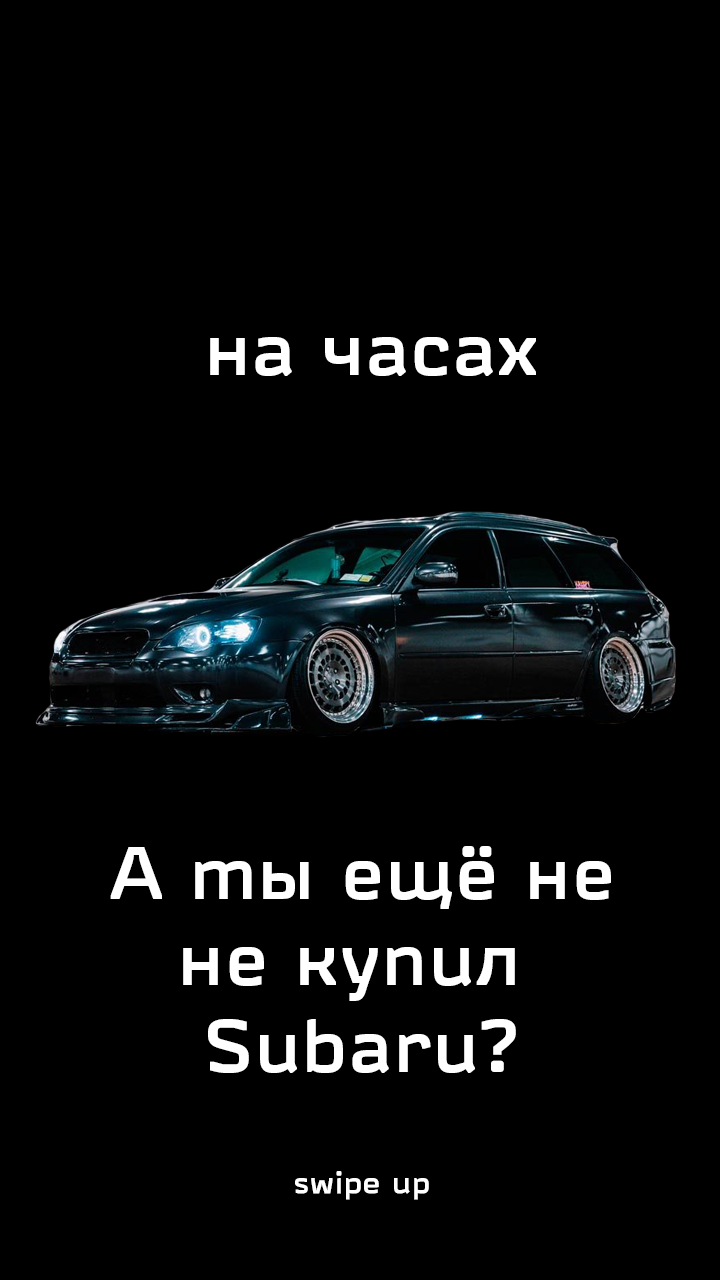
<style>
.page{position:relative;width:720px;height:1280px;background:#000000}
.page>*{position:absolute;margin:0}
.t1{font:72px "RussianRailGPro";color:#ffffff;font-weight:bold;scale:0.92 1}
.t2{font:30px "RussianRailGPro";color:#ffffff;font-weight:bold;scale:0.92 1}
</style>
<div class="page">
<p class="t1" style="left:210px;top:337px;width:326px;height:39px">на часах</p>
<p class="t1" style="left:110px;top:846px;width:501px;height:354px;text-align:center">А ты ещё не<br>не купил <br>Subaru?<br><br><span class="t2">swipe up</span></p>
</div>
